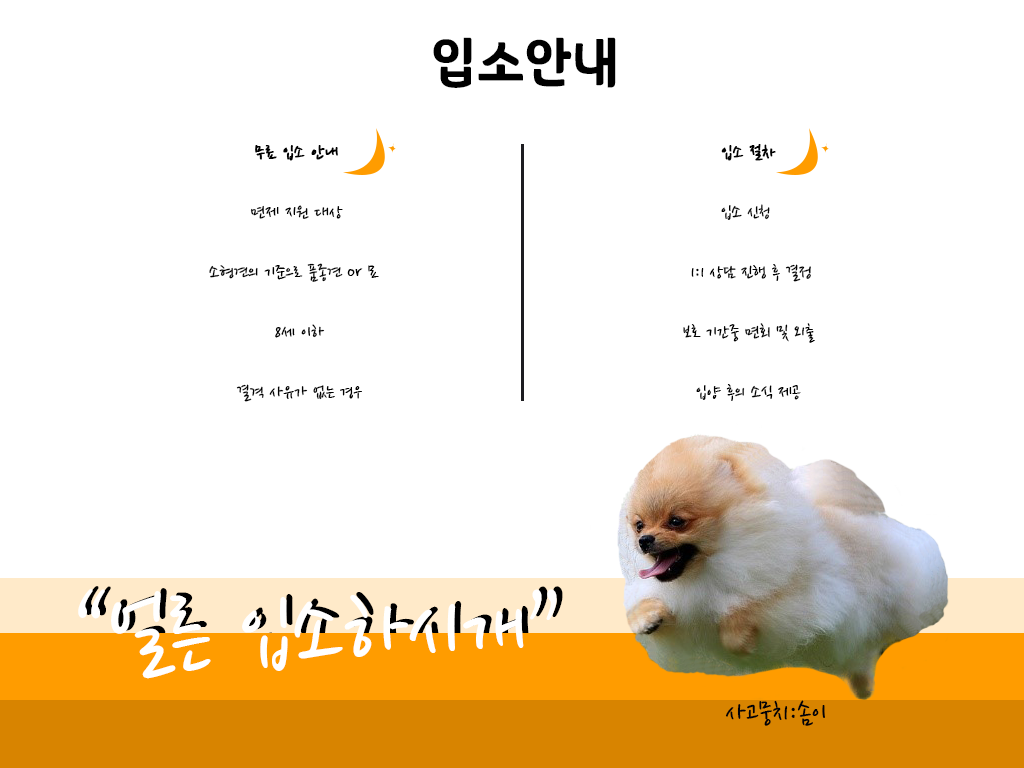
<style>
.page{position:relative;width:1024px;height:768px;background:#ffffff}
.page>*{position:absolute;margin:0}
.t1{font:60px "SDSamliphopangcheTTFBasic";color:#000000}
.t2{font:20px/60px "NanumPen";color:#010101}
.t3{font:20px/60px "NanumPen";color:#010101;font-weight:bold}
.t4{font:100px "NanumPen";color:#ffffff}
.t5{font:100px "NanumPen"}
.t6{font:30px "NanumPen";color:#010207}
</style>
<div class="page">
<p class="t1" style="left:433px;top:37px;width:183px;height:51px">입소안내</p>
<p class="t2" style="left:209px;top:145px;width:170px;height:257px;text-align:center"><span class="t3"> 무료 입소 안내 <br></span>면제 지원 대상<br>소형견의 기준으로 품종견 or 묘 <br> 8세 이하<br> 결격 사유가 없는 경우</p>
<p class="t2" style="left:683px;top:144px;width:132px;height:257px;text-align:center"><span class="t3">입소 절차<br></span>입소 신청 <br> 1:1 상담 진행 후 결정<br>보호 기간중 면회 및 외출<br>입양 후의 소식 제공</p>
<p class="t4" style="left:78px;top:589px;width:479px;height:90px">“얼른 입소하시개”</p>
<p class="t5" style="left:84px;top:586px;width:479px;height:90px">“얼른 입소하시개”</p>
<p class="t6" style="left:725px;top:700px;width:100px;height:26px">사고뭉치:솜이</p>
</div>
